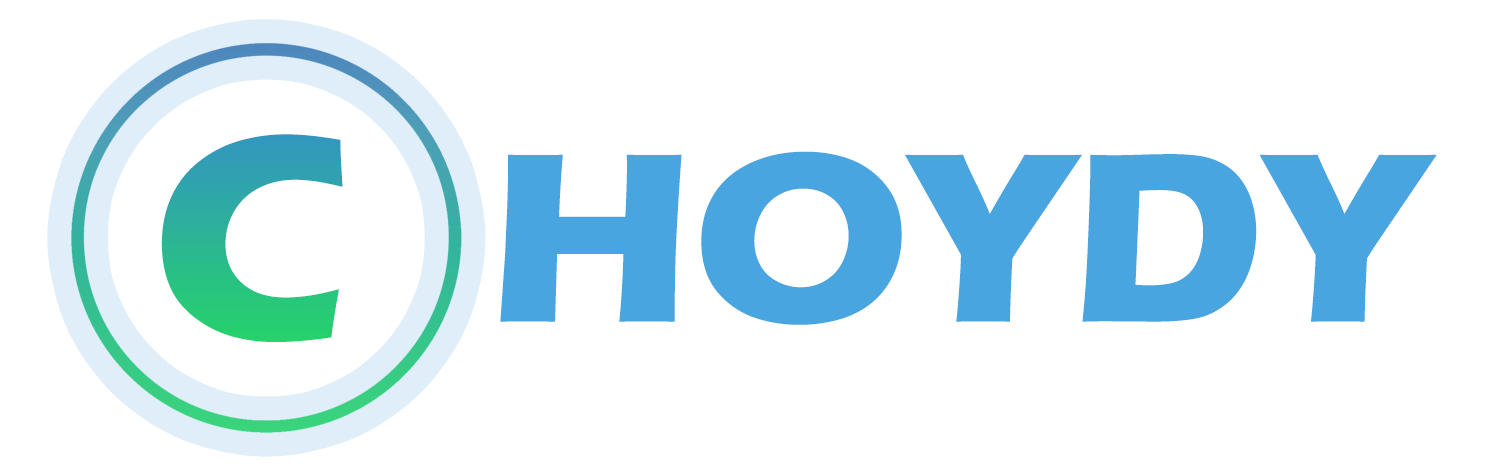
<style>
.page{position:relative;width:1492px;height:475px;background:#ffffff}
.page>*{position:absolute;margin:0}
.t1{font:300px "ErasITC-Bold"}
.t2{font:250px "ErasITC-Bold";color:#49a5df}
</style>
<div class="page">
<p class="t1" style="left:161px;top:134px;width:182px;height:208px">C</p>
<p class="t2" style="left:500px;top:151px;width:937px;height:174px">HOYDY</p>
</div>
